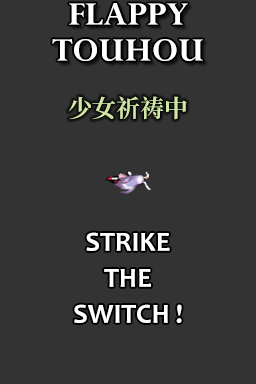
<style>
.page{position:relative;width:256px;height:384px;background:#333333}
.page>*{position:absolute;margin:0}
.t1{font:36px/36px "Perpetua-Bold";color:#ffffff}
.t2{font:24px "SourceHanSerifCN-Bold";color:#d0e7a5}
.t3{font:28px/36px "Candara-Bold";color:#ffffff}
</style>
<div class="page">
<p class="t1" style="left:52px;top:3px;width:151px;height:58px;text-align:center">FLAPPY<br>TOUHOU</p>
<p class="t2" style="left:68px;top:96px;width:119px;height:24px">少女祈祷中</p>
<p class="t3" style="left:74px;top:232px;width:108px;height:91px;text-align:center">STRIKE<br>THE<br>SWITCH !</p>
</div>
